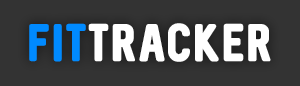
<style>
.page{position:relative;width:300px;height:86px;background:#333333}
.page>*{position:absolute;margin:0}
.t1{font:41.3px "Sequel-Neue";color:#ffffff;font-weight:bold}
.t2{font:41.3px "Sequel-Neue";color:#008aff;font-weight:bold}
</style>
<div class="page">
<p class="t1" style="left:29px;top:23px;width:242px;height:39px"><span class="t2">Fit</span>Tracker</p>
</div>
